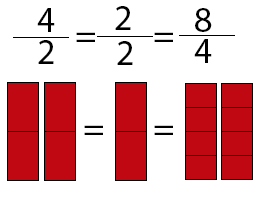
<style>
.page{position:relative;width:260px;height:200px;background:#ffffff}
.page>*{position:absolute;margin:0}
.t1{font:36px "MyriadPro-Regular";color:#000000}
</style>
<div class="page">
<p class="t1" style="left:115px;top:6px;width:16px;height:24px">2</p>
<p class="t1" style="left:37px;top:8px;width:18px;height:24px">4</p>
<p class="t1" style="left:195px;top:8px;width:17px;height:24px">8</p>
<p class="t1" style="left:38px;top:40px;width:16px;height:24px">2</p>
<p class="t1" style="left:76px;top:32px;width:19px;height:10px">=</p>
<p class="t1" style="left:117px;top:41px;width:16px;height:24px">2</p>
<p class="t1" style="left:154px;top:32px;width:19px;height:10px">=</p>
<p class="t1" style="left:194px;top:39px;width:18px;height:24px">4</p>
<p class="t1" style="left:84px;top:125px;width:19px;height:10px">=</p>
<p class="t1" style="left:154px;top:125px;width:19px;height:10px">=</p>
</div>
